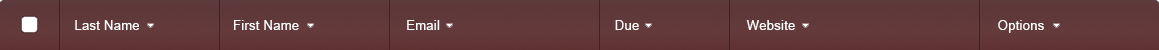
<style>
.page{position:relative;width:1159px;height:50px}
.page>*{position:absolute;margin:0}
.t1{font:13.7px "ArialUnicodeMS";letter-spacing:0.02em;color:#ffffff;scale:0.95 1}
</style>
<div class="page">
<p class="t1" style="left:75px;top:20px;width:64px;height:10px">Last Name</p>
<p class="t1" style="left:234px;top:20px;width:65px;height:10px">First Name</p>
<p class="t1" style="left:407px;top:20px;width:33px;height:10px">Email</p>
<p class="t1" style="left:615px;top:20px;width:24px;height:10px">Due</p>
<p class="t1" style="left:746px;top:20px;width:49px;height:10px">Website</p>
<p class="t1" style="left:998px;top:20px;width:46px;height:13px">Options</p>
</div>
